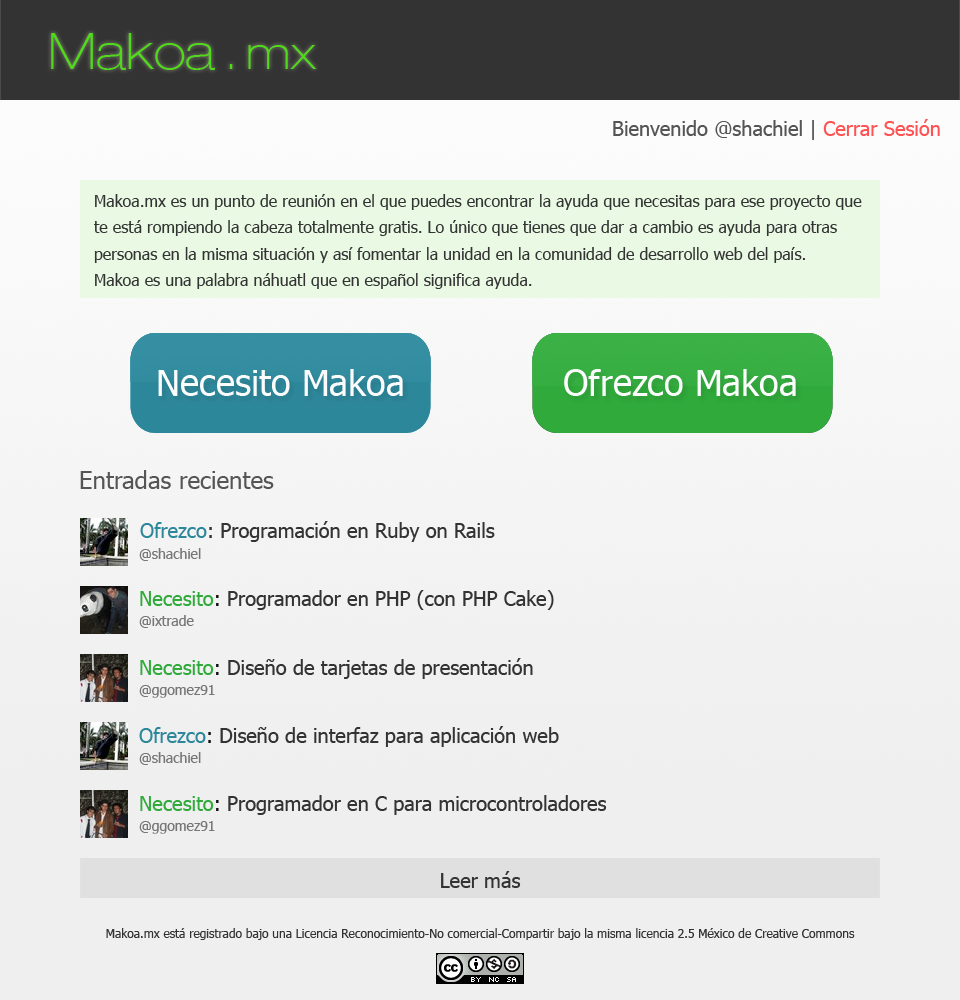
<style>
.page{position:relative;width:960px;height:1000px}
.page>*{position:absolute;margin:0}
.t1{font:50px "HelveticaNeueLTCom-ThEx";color:#51d91c}
.t2{font:46px "HelveticaNeueLTCom-ThEx";color:#51d91c}
.t3{font:20px "Tahoma";color:#555555}
.t4{font:20px "Tahoma";color:#ff5252}
.t5{font:16px "Tahoma";color:#333333}
.t6{font:36px "Tahoma";color:#fcfcfc}
.t7{font:24px "Tahoma";color:#555555}
.t8{font:20px "Tahoma";color:#333333}
.t9{font:20px "Tahoma";color:#2d879a}
.t10{font:14px "Tahoma";color:#777777}
.t11{font:20px "Tahoma";color:#30aa3b}
.t12{font:20px "Tahoma";color:#111111}
.t13{font:12px "Tahoma";color:#333333}
</style>
<div class="page">
<p class="t1" style="left:51px;top:33px;width:266px;height:37px">Makoa <span class="t2">. mx</span></p>
<p class="t3" style="left:613px;top:119px;width:327px;height:21px">Bienvenido @shachiel | <span class="t4">Cerrar Sesión</span></p>
<p class="t5" style="left:94px;top:194px;width:768px;height:95px">Makoa.mx es un punto de reunión en el que puedes encontrar la ayuda que necesitas para ese proyecto que<br><br>te está rompiendo la cabeza totalmente gratis. Lo único que tienes que dar a cambio es ayuda para otras<br><br>personas en la misma situación y así fomentar la unidad en la comunidad de desarrollo web del país.<br><br>Makoa es una palabra náhuatl que en español significa ayuda.</p>
<p class="t6" style="left:158px;top:369px;width:245px;height:27px">Necesito Makoa</p>
<p class="t6" style="left:564px;top:369px;width:232px;height:27px">Ofrezco Makoa</p>
<p class="t7" style="left:80px;top:470px;width:194px;height:19px">Entradas recientes</p>
<p class="t8" style="left:140px;top:521px;width:355px;height:21px"><span class="t9">Ofrezco</span>: Programación en Ruby on Rails</p>
<p class="t10" style="left:139px;top:548px;width:62px;height:13px">@shachiel</p>
<p class="t8" style="left:140px;top:590px;width:414px;height:20px"><span class="t11">Necesito</span><span class="t12">: </span>Programador en PHP (con PHP Cake)</p>
<p class="t10" style="left:139px;top:615px;width:55px;height:13px">@ixtrade</p>
<p class="t8" style="left:140px;top:658px;width:393px;height:21px"><span class="t11">Necesito</span><span class="t12">: </span>Diseño de tarjetas de presentación</p>
<p class="t10" style="left:139px;top:685px;width:76px;height:13px">@ggomez91</p>
<p class="t8" style="left:139px;top:726px;width:420px;height:21px"><span class="t9">Ofrezco</span><span class="t12">: </span>Diseño de interfaz para aplicación web</p>
<p class="t10" style="left:139px;top:752px;width:62px;height:13px">@shachiel</p>
<p class="t8" style="left:140px;top:795px;width:467px;height:20px"><span class="t11">Necesito</span><span class="t12">: </span>Programador en C para microcontroladores</p>
<p class="t10" style="left:139px;top:821px;width:76px;height:13px">@ggomez91</p>
<p class="t8" style="left:441px;top:871px;width:80px;height:17px">Leer más</p>
<p class="t13" style="left:106px;top:928px;width:749px;height:12px">Makoa.mx está registrado bajo una Licencia Reconocimiento-No comercial-Compartir bajo la misma licencia 2.5 México de Creative Commons</p>
</div>
